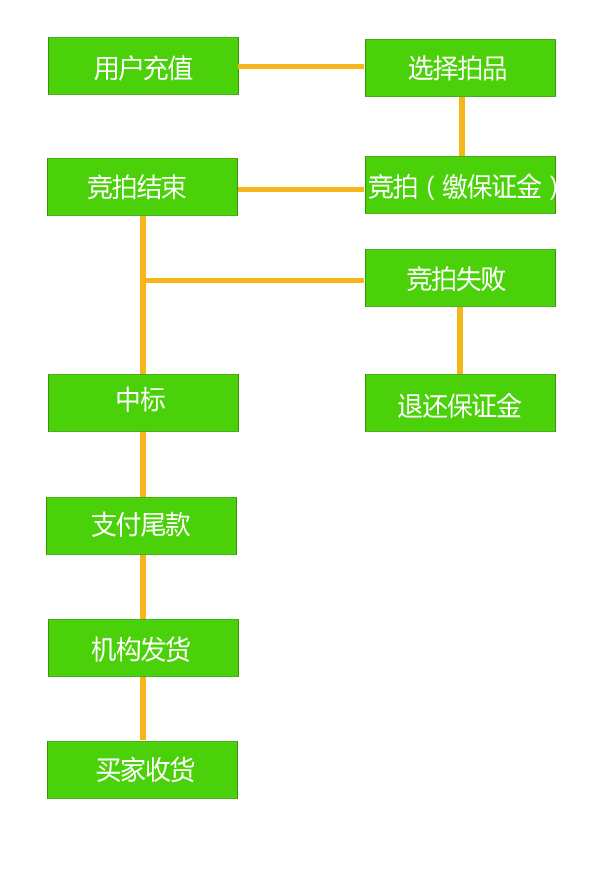
<style>
.page{position:relative;width:600px;height:873px;background:#ffffff}
.page>*{position:absolute;margin:0}
.t1{font:26px "MicrosoftYaHei";color:#ffffff;scale:0.95 1}
</style>
<div class="page">
<p class="t1" style="left:94px;top:55px;width:99px;height:26px">用户充值</p>
<p class="t1" style="left:408px;top:55px;width:98px;height:26px">选择拍品</p>
<p class="t1" style="left:87px;top:174px;width:99px;height:26px">竞拍结束</p>
<p class="t1" style="left:368px;top:173px;width:189px;height:27px">竞拍（缴保证金）</p>
<p class="t1" style="left:407px;top:266px;width:99px;height:26px">竞拍失败</p>
<p class="t1" style="left:117px;top:386px;width:48px;height:26px">中标</p>
<p class="t1" style="left:398px;top:393px;width:124px;height:26px">退还保证金</p>
<p class="t1" style="left:92px;top:511px;width:98px;height:26px">支付尾款</p>
<p class="t1" style="left:91px;top:636px;width:99px;height:26px">机构发货</p>
<p class="t1" style="left:96px;top:756px;width:99px;height:27px">买家收货</p>
</div>
